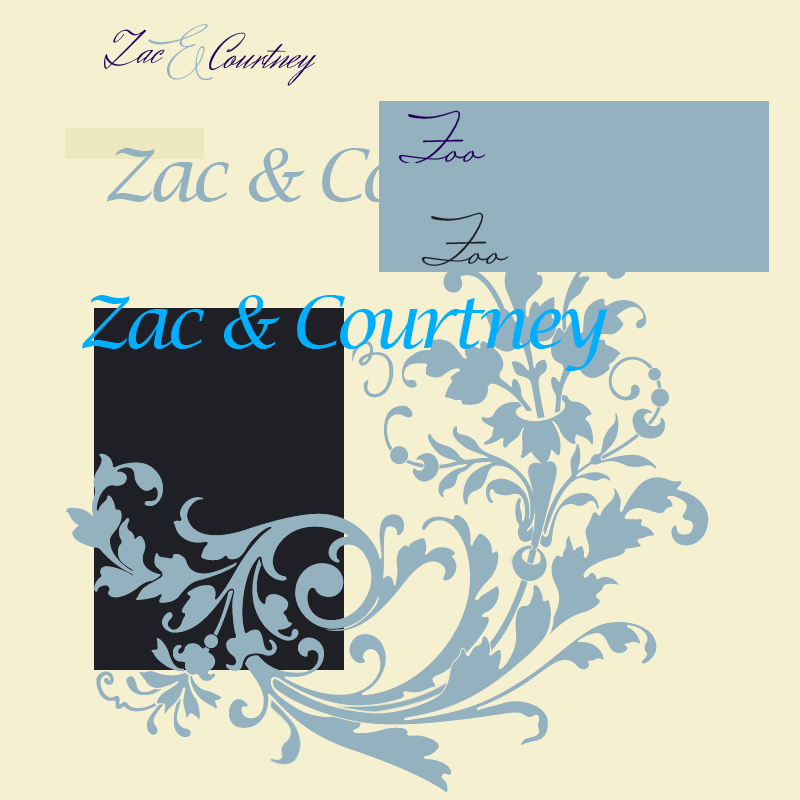
<style>
.page{position:relative;width:800px;height:800px;background:#f5f0d0}
.page>*{position:absolute;margin:0}
.t1{font:48px "HerrVonMuellerhoff";color:#220059}
.t2{font:72px "MrSheffield";color:#93b1bf}
.t3{font:72px "MrSheffield";color:#220059}
.t4{font:72px "LucidaCalligraphy-Italic";letter-spacing:-0.075em;color:#93b1bf}
.t5{font:72px "MrSheffield";color:#1f1f26}
.t6{font:72px "LucidaCalligraphy-Italic";letter-spacing:-0.075em;color:#00aeff}
</style>
<div class="page">
<p class="t1" style="left:103px;top:29px;width:62px;height:40px">Zac</p>
<p class="t2" style="left:148px;top:24px;width:65px;height:57px">&amp;</p>
<p class="t1" style="left:209px;top:32px;width:107px;height:54px">Courtney</p>
<p class="t3" style="left:398px;top:110px;width:88px;height:54px">Foo</p>
<p class="t4" style="left:107px;top:148px;width:525px;height:76px">Zac &amp; Courtney</p>
<p class="t5" style="left:421px;top:212px;width:88px;height:54px">Foo</p>
<p class="t6" style="left:82px;top:295px;width:525px;height:76px">Zac &amp; Courtney</p>
</div>
